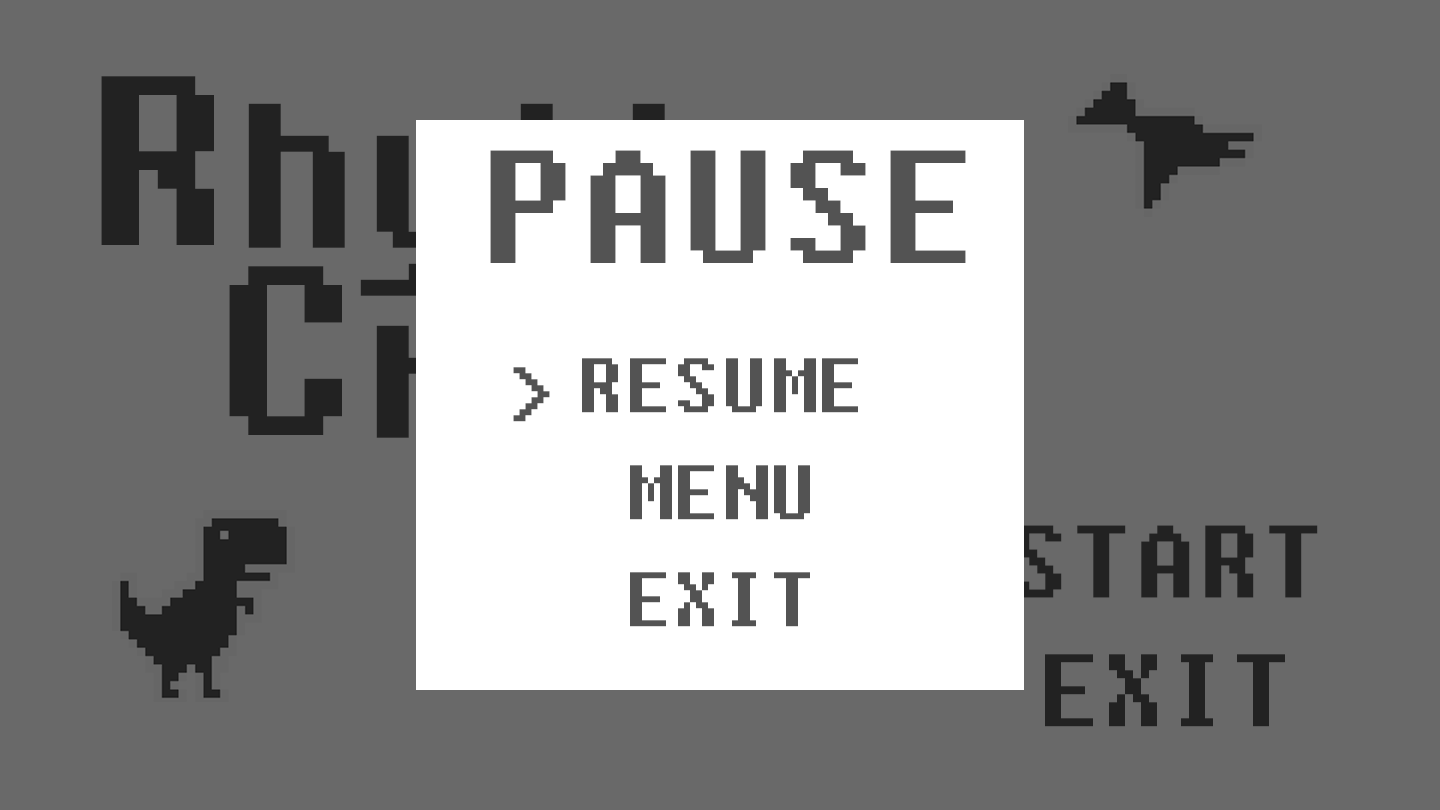
<style>
.page{position:relative;width:1440px;height:810px;background:#696969}
.page>*{position:absolute;margin:0}
.t1{font:200px "Fixedsys";color:#535353}
.t2{font:96px "Fixedsys";color:#535353}
.t3{font:128px "Fixedsys";color:#222222}
</style>
<div class="page">
<p class="t1" style="left:490px;top:150px;width:476px;height:113px">PAUSE</p>
<p class="t2" style="left:582px;top:358px;width:276px;height:55px">RESUME</p>
<p class="t2" style="left:513px;top:367px;width:37px;height:55px">&gt;</p>
<p class="t2" style="left:630px;top:465px;width:180px;height:55px">MENU</p>
<p class="t3" style="left:1013px;top:525px;width:305px;height:73px">START</p>
<p class="t2" style="left:630px;top:572px;width:180px;height:55px">EXIT</p>
<p class="t3" style="left:1045px;top:654px;width:240px;height:73px">EXIT</p>
</div>
